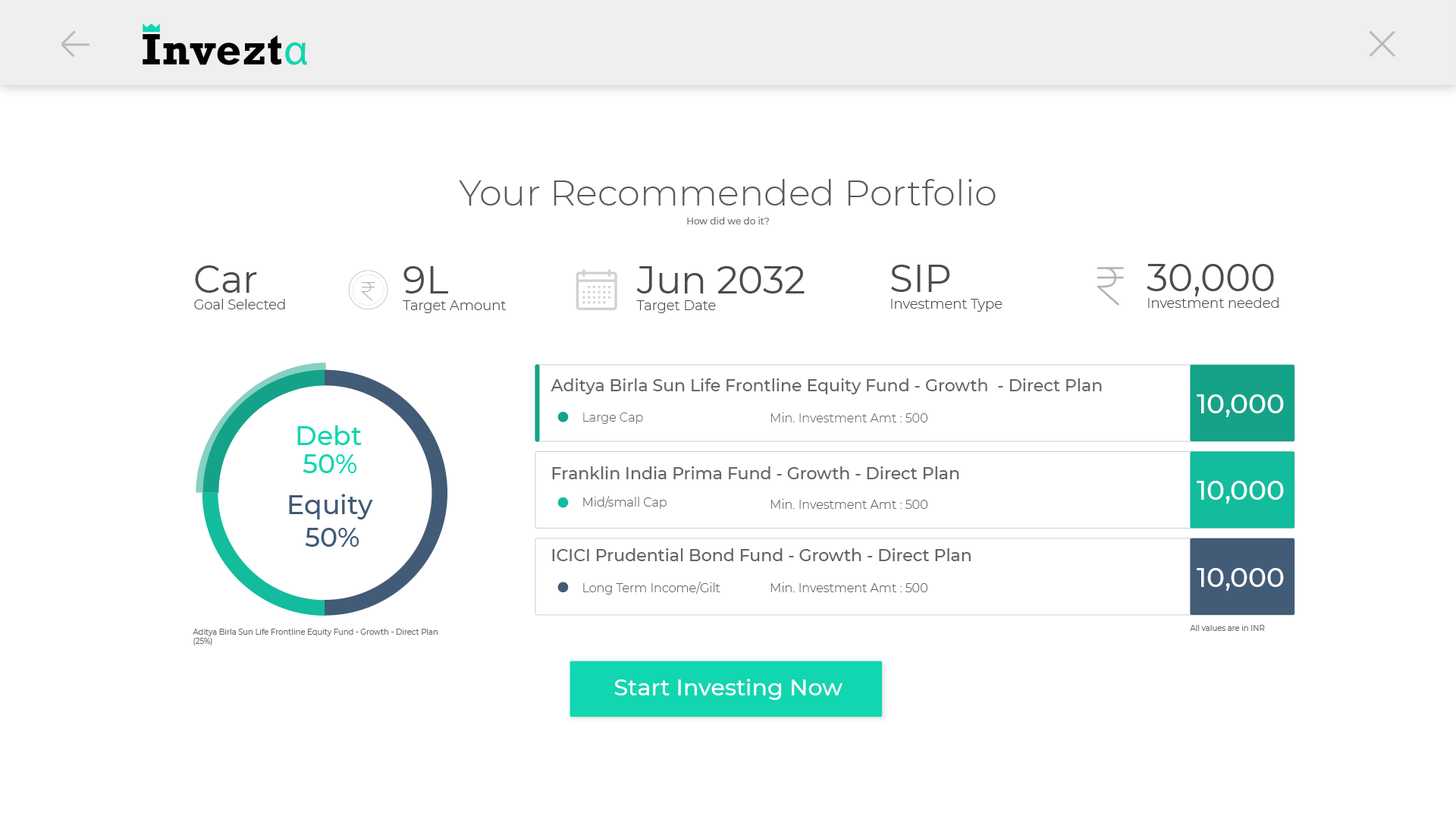
<style>
.page{position:relative;width:1456px;height:819px;background:#ffffff}
.page>*{position:absolute;margin:0}
.t1{font:36.4px "Montserrat-Light";color:#5b5b5b}
.t2{font:9.1px "Montserrat-Medium";color:#808080}
.t3{font:13.6px "Montserrat-Light";color:#4d4d4d}
.t4{font:37.9px "Montserrat-Regular";color:#4d4d4d}
.t5{font:16.7px "Montserrat-Medium";color:#666666}
.t6{font:27.3px "Montserrat-Medium";color:#ffffff}
.t7{font:12.1px "Montserrat-Light";color:#666666}
.t8{font:26.3px "Montserrat-Medium";color:#12d6b0}
.t9{font:26.3px "Montserrat-Medium";color:#425b77}
.t10{font:7.6px "Montserrat-Regular";color:#666666}
.t11{font:22.7px "Montserrat-Medium";color:#ffffff}
</style>
<div class="page">
<p class="t1" style="left:459px;top:179px;width:537px;height:27px">Your Recommended Portfolio</p>
<p class="t2" style="left:687px;top:217px;width:82px;height:7px">How did we do it?</p>
<p class="t3" style="left:194px;top:265px;width:91px;height:44px"><span class="t4">Car<br></span>Goal Selected</p>
<p class="t3" style="left:403px;top:266px;width:103px;height:47px"><span class="t4">9L<br></span>Target Amount</p>
<p class="t3" style="left:636px;top:266px;width:169px;height:47px"><span class="t4">Jun 2032<br></span>Target Date</p>
<p class="t3" style="left:891px;top:265px;width:112px;height:47px"><span class="t4">SIP<br></span>Investment Type</p>
<p class="t3" style="left:1147px;top:264px;width:132px;height:44px"><span class="t4">30,000<br></span>Investment needed</p>
<p class="t5" style="left:551px;top:378px;width:551px;height:16px">Aditya Birla Sun Life Frontline Equity Fund - Growth  - Direct Plan</p>
<p class="t6" style="left:1197px;top:394px;width:87px;height:23px">10,000</p>
<p class="t7" style="left:583px;top:413px;width:60px;height:11px">Large Cap</p>
<p class="t7" style="left:770px;top:413px;width:157px;height:9px">Min. Investment Amt : 500</p>
<p class="t8" style="left:297px;top:425px;width:65px;height:20px">Debt</p>
<p class="t8" style="left:303px;top:454px;width:53px;height:19px">50%</p>
<p class="t5" style="left:552px;top:466px;width:407px;height:13px">Franklin India Prima Fund - Growth - Direct Plan</p>
<p class="t6" style="left:1197px;top:481px;width:87px;height:23px">10,000</p>
<p class="t9" style="left:289px;top:494px;width:84px;height:25px">Equity</p>
<p class="t7" style="left:583px;top:496px;width:84px;height:13px">Mid/small Cap</p>
<p class="t7" style="left:770px;top:499px;width:157px;height:10px">Min. Investment Amt : 500</p>
<p class="t9" style="left:305px;top:528px;width:54px;height:19px">50%</p>
<p class="t5" style="left:552px;top:548px;width:419px;height:13px">ICICI Prudential Bond Fund - Growth - Direct Plan</p>
<p class="t6" style="left:1197px;top:568px;width:87px;height:23px">10,000</p>
<p class="t7" style="left:583px;top:582px;width:137px;height:13px">Long Term Income/Gilt</p>
<p class="t7" style="left:770px;top:582px;width:157px;height:10px">Min. Investment Amt : 500</p>
<p class="t10" style="left:193px;top:629px;width:245px;height:16px">Aditya Birla Sun Life Frontline Equity Fund - Growth - Direct Plan<br>(25%)</p>
<p class="t10" style="left:1190px;top:625px;width:75px;height:6px">All values are in INR</p>
<p class="t11" style="left:614px;top:679px;width:228px;height:21px">Start Investing Now</p>
</div>
